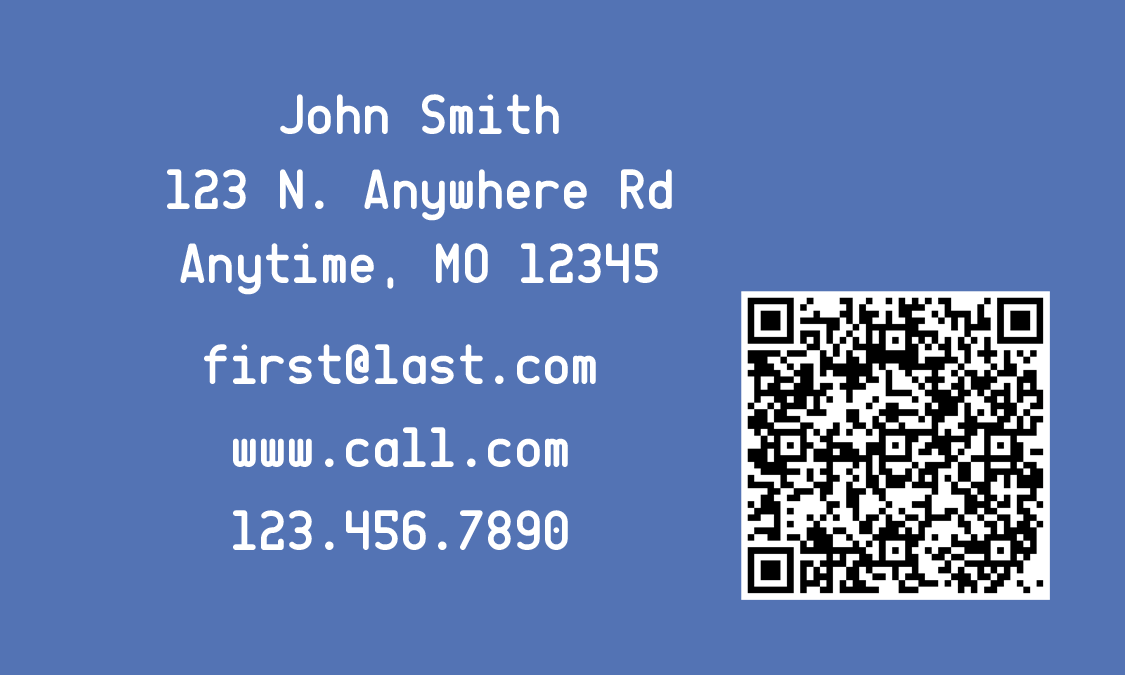
<style>
.page{position:relative;width:1125px;height:675px;background:#5373b4}
.page>*{position:absolute;margin:0}
.t1{font:58.1px/74.7px "CQMono";color:#ffffff}
.t2{font:58.1px/41.5px "CQMono";color:#ffffff}
</style>
<div class="page">
<p class="t1" style="left:167px;top:94px;width:505px;height:201px;text-align:center">John Smith<br>123 N. Anywhere Rd<br>Anytime, MO 12345</p>
<p class="t2" style="left:204px;top:344px;width:392px;height:206px;text-align:center">first@last.com<br><br>www.call.com<br><br>123.456.7890</p>
</div>
